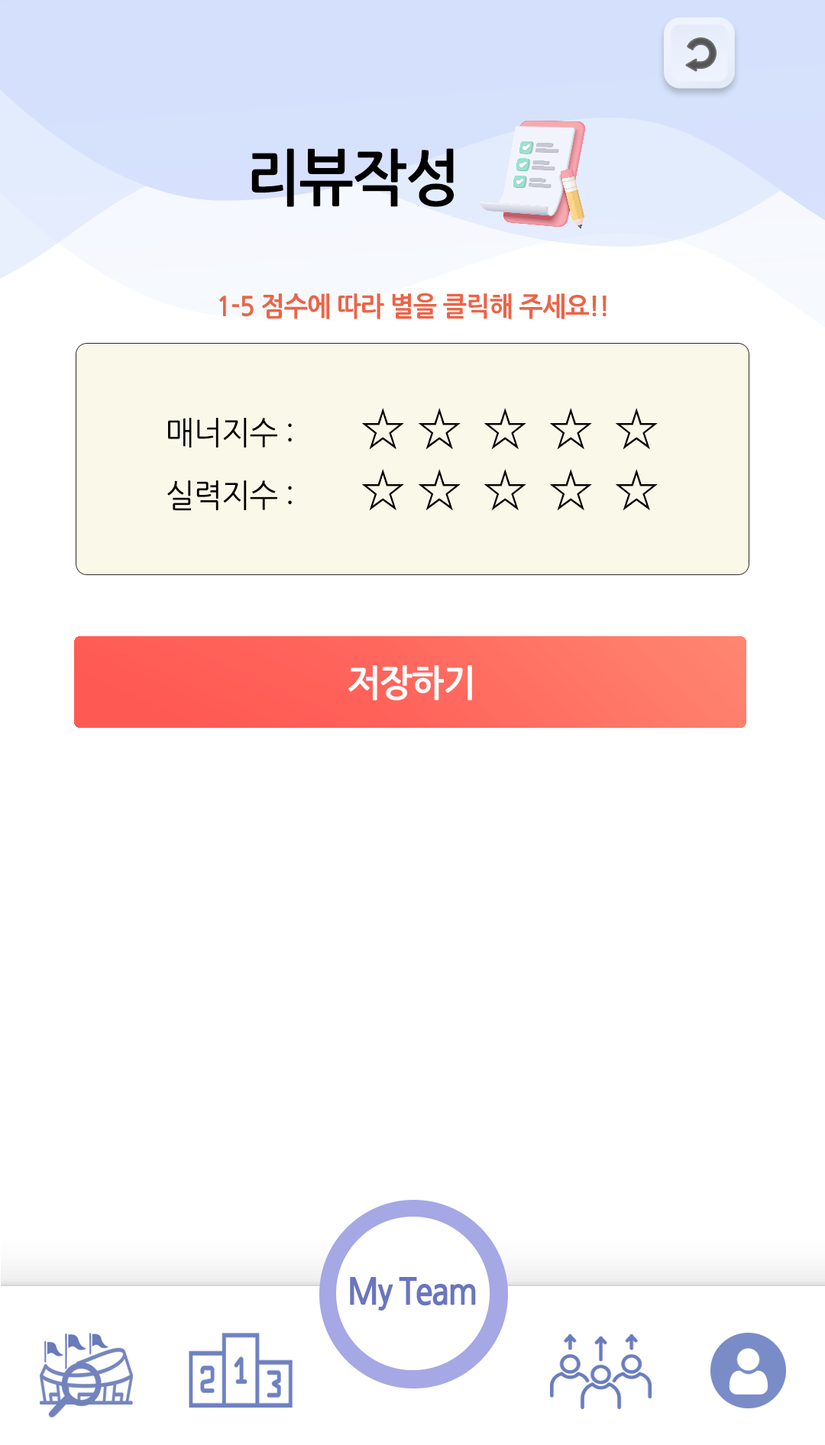
<style>
.page{position:relative;width:825px;height:1445px;background:#ffffff}
.page>*{position:absolute;margin:0}
.t1{font:61.1px "NanumGothicBold";letter-spacing:-0.025em;color:#000000;scale:0.95 1}
.t2{font:26.7px "NanumGothicBold";letter-spacing:-0.025em;color:#ec6446;scale:0.95 1}
.t3{font:53.5px "NanumGothic";letter-spacing:-0.025em;color:#000000;scale:0.95 1}
.t4{font:32.1px "NanumGothic";letter-spacing:-0.025em;color:#000000;scale:0.95 1}
.t5{font:36.7px "NanumGothicBold";letter-spacing:-0.025em;color:#ffffff;scale:0.95 1}
</style>
<div class="page">
<p class="t1" style="left:251px;top:148px;width:203px;height:59px">리뷰작성</p>
<p class="t2" style="left:219px;top:293px;width:388px;height:26px">1-5 점수에 따라 별을 클릭해 주세요!!</p>
<p class="t3" style="left:362px;top:408px;width:42px;height:42px">☆</p>
<p class="t3" style="left:419px;top:408px;width:42px;height:42px">☆</p>
<p class="t3" style="left:484px;top:408px;width:42px;height:42px">☆</p>
<p class="t3" style="left:550px;top:408px;width:42px;height:42px">☆</p>
<p class="t3" style="left:616px;top:408px;width:42px;height:42px">☆</p>
<p class="t4" style="left:168px;top:418px;width:124px;height:30px">매너지수 :</p>
<p class="t3" style="left:362px;top:469px;width:42px;height:42px">☆</p>
<p class="t3" style="left:419px;top:469px;width:42px;height:42px">☆</p>
<p class="t3" style="left:484px;top:469px;width:42px;height:42px">☆</p>
<p class="t3" style="left:550px;top:469px;width:42px;height:42px">☆</p>
<p class="t3" style="left:616px;top:469px;width:42px;height:42px">☆</p>
<p class="t4" style="left:167px;top:481px;width:125px;height:30px">실력지수 :</p>
<p class="t5" style="left:348px;top:665px;width:124px;height:36px">저장하기</p>
</div>
